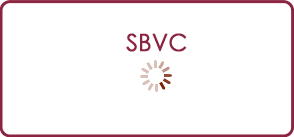
<style>
.page{position:relative;width:294px;height:137px;background:#ffffff}
.page>*{position:absolute;margin:0}
.t1{font:24px "CenturyGothic";color:#8b2440;font-weight:bold;scale:0.95 1}
</style>
<div class="page">
<p class="t1" style="left:126px;top:33px;width:61px;height:19px">SBVC</p>
</div>
